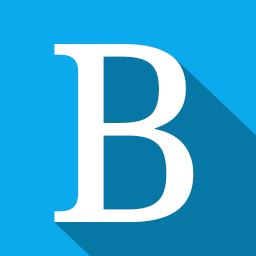
<style>
.page{position:relative;width:256px;height:256px;background:#0aaaec}
.page>*{position:absolute;margin:0}
.t1{font:250px "DroidSerif";color:#ffffff}
</style>
<div class="page">
<p class="t1" style="left:54px;top:44px;width:140px;height:178px">B</p>
</div>
